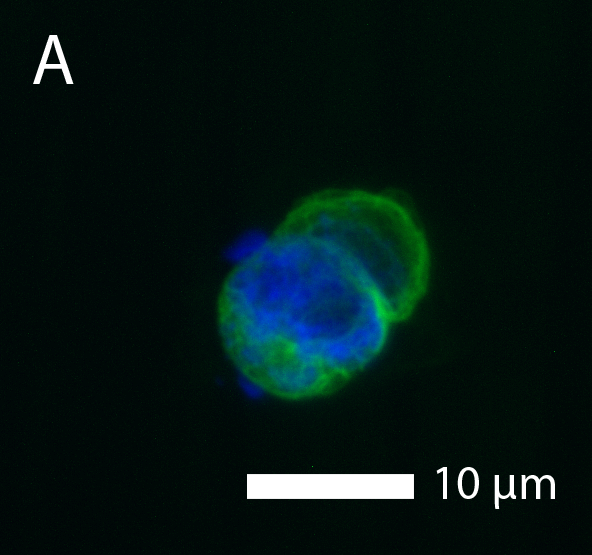
<style>
.page{position:relative;width:592px;height:555px;background:#000908}
.page>*{position:absolute;margin:0}
.t1{font:72px "MyriadPro-Regular";color:#ffffff}
.t2{font:48px "MyriadPro-Regular";color:#ffffff}
</style>
<div class="page">
<p class="t1" style="left:33px;top:35px;width:41px;height:49px">A</p>
<p class="t2" style="left:436px;top:467px;width:119px;height:42px">10 μm</p>
</div>
